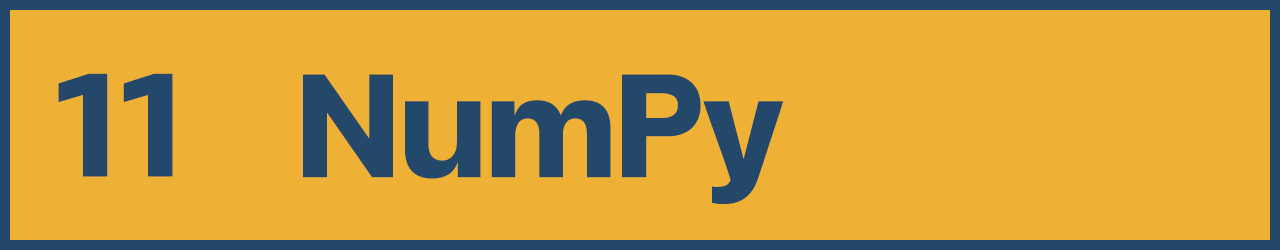
<style>
.page{position:relative;width:1280px;height:250px;background:#efb036}
.page>*{position:absolute;margin:0}
.t1{font:200px "FCMinimalBold";color:#23486a}
</style>
<div class="page">
<p class="t1" style="left:58px;top:73px;width:115px;height:104px">11</p>
<p class="t1" style="left:303px;top:74px;width:480px;height:130px">NumPy</p>
</div>
